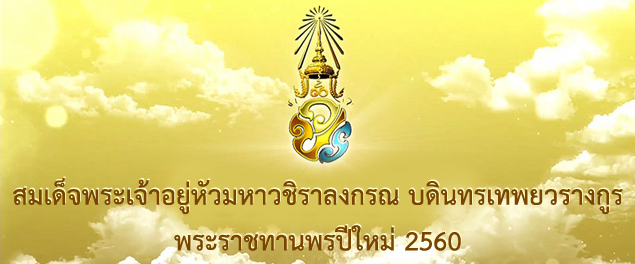
<style>
.page{position:relative;width:635px;height:264px}
.page>*{position:absolute;margin:0}
.t1{font:38.1px "THSarabunPSK-Bold";color:#794300}
.t2{font:38.1px "THSarabunPSK-Bold"}
</style>
<div class="page">
<p class="t1" style="left:13px;top:178px;width:610px;height:73px;text-align:center">สมเด็จพระเจ้าอยู่หัวมหาวชิราลงกรณ บดินทรเทพยวรางกูร พระราชทานพรปีใหม่ 2560</p>
<p class="t2" style="left:14px;top:176px;width:610px;height:74px;text-align:center">สมเด็จพระเจ้าอยู่หัวมหาวชิราลงกรณ บดินทรเทพยวรางกูร พระราชทานพรปีใหม่ 2560</p>
</div>
